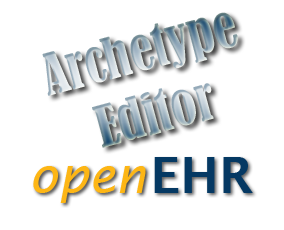
<style>
.page{position:relative;width:284px;height:230px;background:#ffffff}
.page>*{position:absolute;margin:0}
.t1{font:53.3px "BernardMT-Condensed"}
.t2{font:50.5px "LucidaSans-Demi";color:#023761}
.t3{font:50.5px "LucidaSans-Italic";color:#fdb615}
</style>
<div class="page">
<p class="t1" style="left:42px;top:12px;width:196px;height:136px;rotate:-15deg">Archetype<br>   Editor</p>
<p class="t2" style="left:154px;top:157px;width:99px;height:36px">EHR</p>
<p class="t3" style="left:33px;top:166px;width:113px;height:37px">open</p>
</div>
